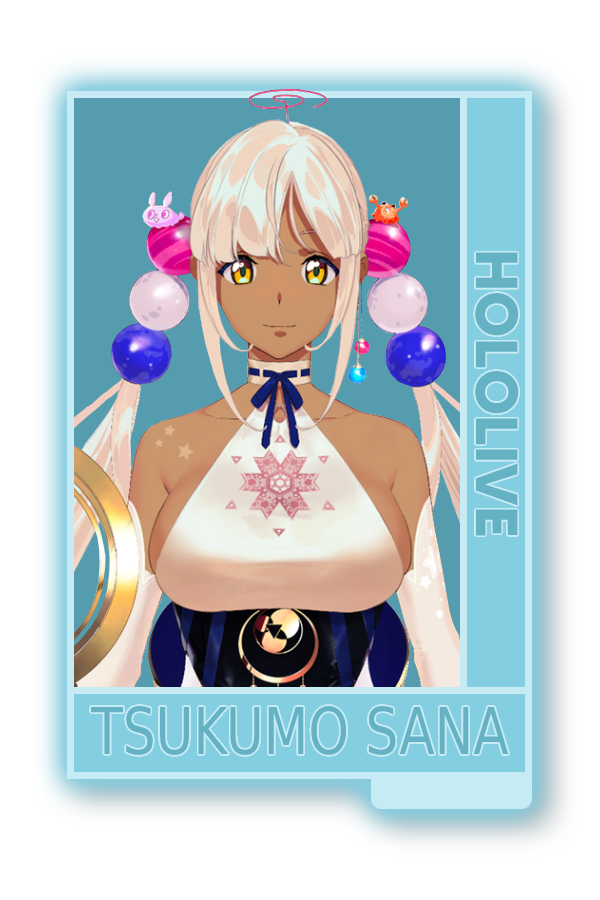
<style>
.page{position:relative;width:600px;height:900px;background:#ffffff}
.page>*{position:absolute;margin:0}
.t1{font:59.2px "MADETOMMY-Bold";color:#66b2c5}
.t2{font:64.6px "CoolveticaRg-Regular";color:#66b2c5;scale:0.8 1}
</style>
<div class="page">
<p class="t1" style="left:475px;top:252px;width:44px;height:284px;rotate:90deg">HOLOLIVE</p>
<p class="t2" style="left:91px;top:706px;width:418px;height:49px">TSUKUMO SANA</p>
</div>
